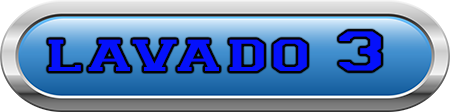
<style>
.page{position:relative;width:450px;height:112px}
.page>*{position:absolute;margin:0}
.t1{font:52.8px "CollegiateInsideFLF";color:#0511fb;scale:1.44 1}
</style>
<div class="page">
<p class="t1" style="left:48px;top:31px;width:333px;height:40px">lavado 3</p>
</div>
